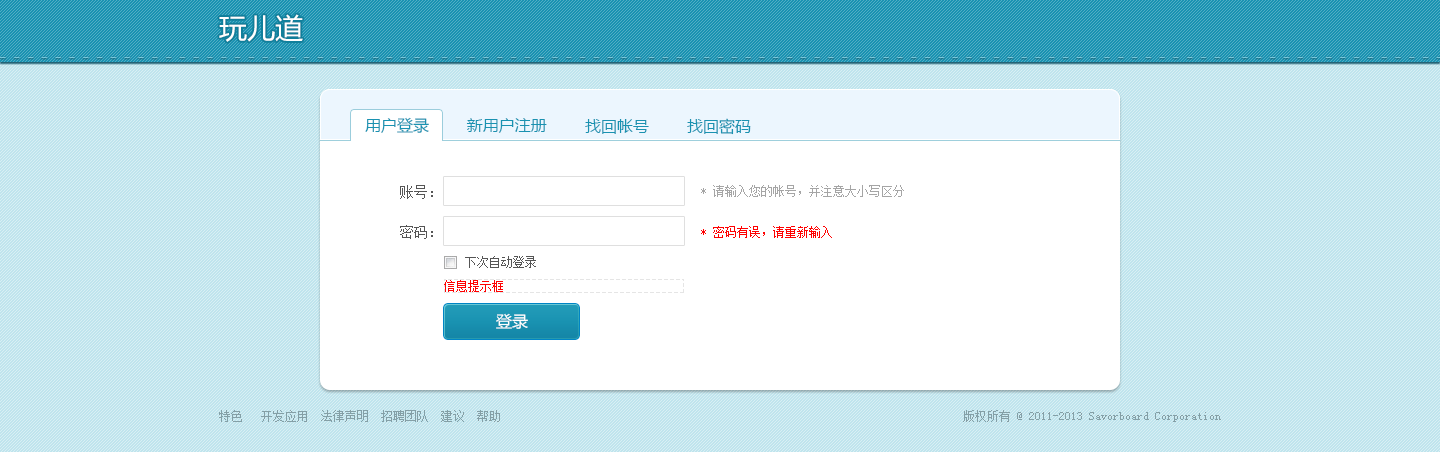
<style>
.page{position:relative;width:1440px;height:452px;background:#bfe4ed}
.page>*{position:absolute;margin:0}
.t1{font:28px "MicrosoftYaHei";color:#ffffff}
.t2{font:16px "MicrosoftYaHei";color:#1992b1}
.t3{font:14px "SimSun";color:#555555}
.t4{font:12px "SimSun";color:#a5a5a5}
.t5{font:12px "SimSun";color:#ff0101}
.t6{font:12px "SimSun";color:#555555}
.t7{font:16px "MicrosoftYaHei";color:#ffffff}
.t8{font:12px "SimSun";color:#849fa6}
</style>
<div class="page">
<p class="t1" style="left:219px;top:14px;width:84px;height:28px">玩儿道</p>
<p class="t2" style="left:365px;top:117px;width:64px;height:16px">用户登录</p>
<p class="t2" style="left:466px;top:118px;width:81px;height:15px">新用户注册</p>
<p class="t2" style="left:585px;top:119px;width:64px;height:15px">找回帐号</p>
<p class="t2" style="left:687px;top:118px;width:64px;height:17px">找回密码</p>
<p class="t3" style="left:400px;top:185px;width:33px;height:14px">账号：</p>
<p class="t4" style="left:701px;top:185px;width:203px;height:12px">* 请输入您的帐号，并注意大小写区分</p>
<p class="t3" style="left:400px;top:225px;width:33px;height:14px">密码：</p>
<p class="t5" style="left:701px;top:226px;width:131px;height:12px">* 密码有误，请重新输入</p>
<p class="t6" style="left:465px;top:256px;width:71px;height:12px">下次自动登录</p>
<p class="t5" style="left:444px;top:280px;width:59px;height:12px">信息提示框</p>
<p class="t7" style="left:496px;top:313px;width:32px;height:16px">登录</p>
<p class="t8" style="left:219px;top:410px;width:281px;height:12px">特色   开发应用  法律声明  招聘团队  建议  帮助</p>
<p class="t8" style="left:963px;top:410px;width:258px;height:12px">版权所有 @ 2011-2013 Savorboard Corporation</p>
</div>
